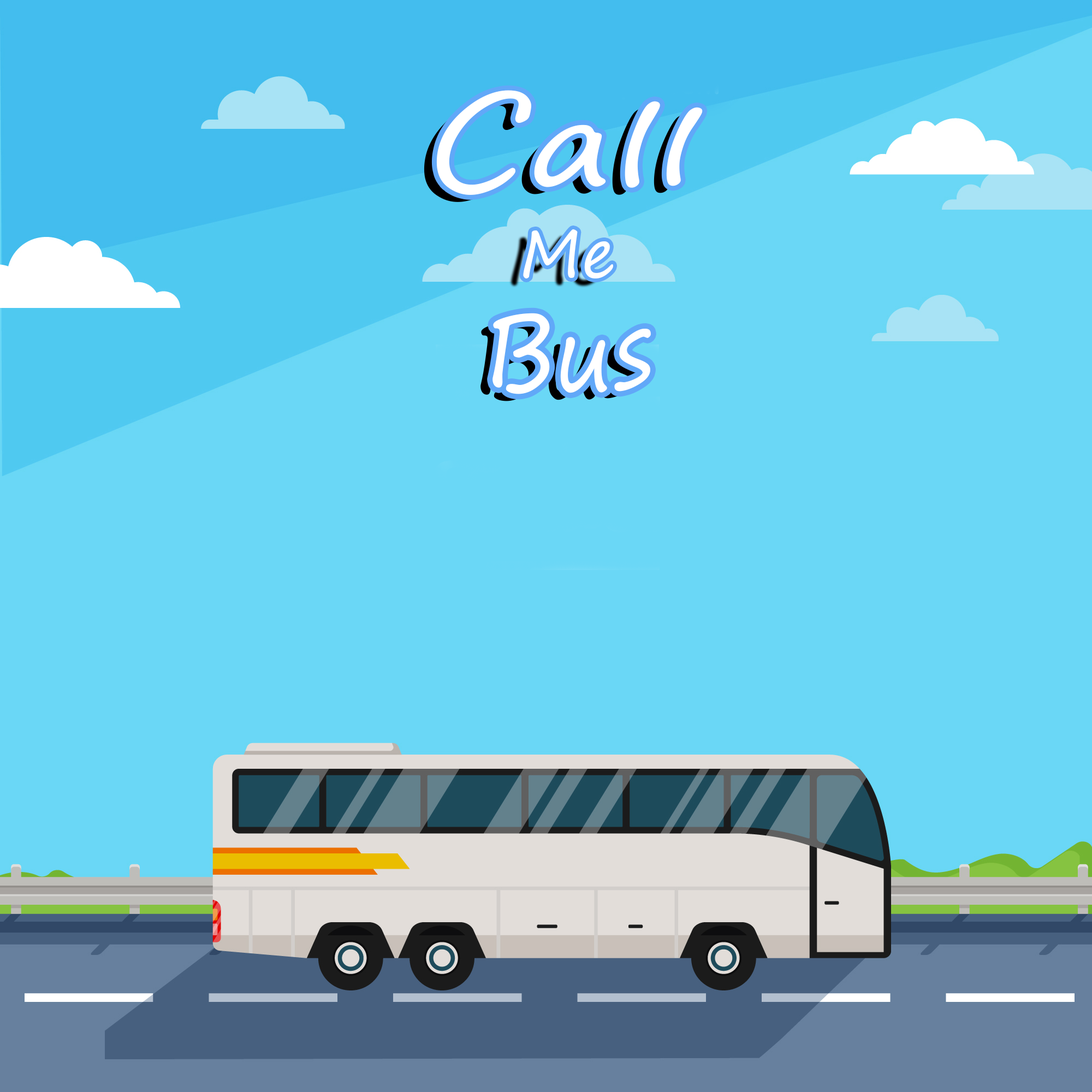
<style>
.page{position:relative;width:1092px;height:1092px;background:#6ad7f6}
.page>*{position:absolute;margin:0}
.t1{font:96.6px "SegoePrint";color:#ffffff;scale:1.5 1}
.t2{font:65.5px "SegoePrint";color:#ffffff}
.t3{font:95.5px "SegoePrint";color:#ffffff}
</style>
<div class="page">
<p class="t1" style="left:436px;top:90px;width:267px;height:105px">Call</p>
<p class="t2" style="left:523px;top:229px;width:90px;height:49px">Me</p>
<p class="t3" style="left:492px;top:313px;width:159px;height:81px">Bus</p>
</div>
